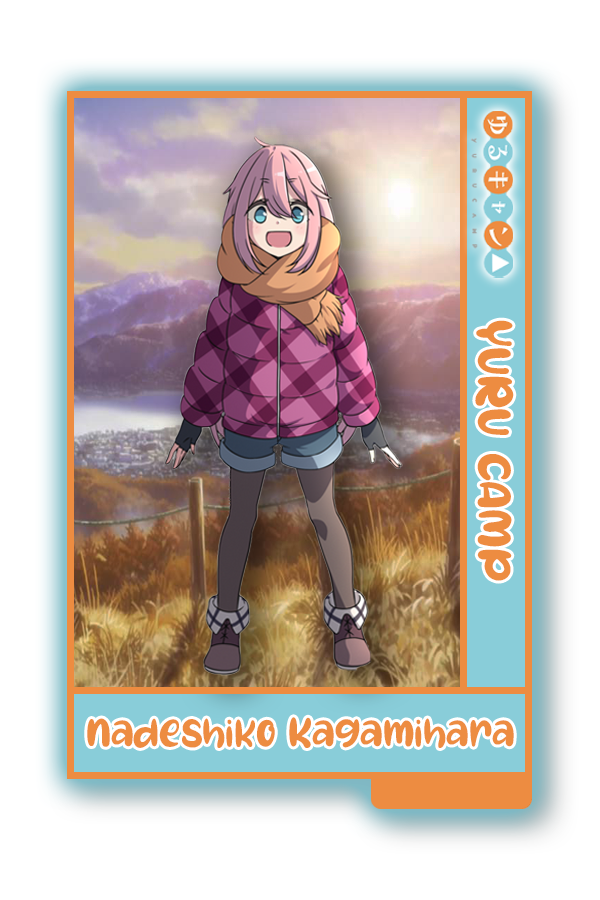
<style>
.page{position:relative;width:600px;height:900px;background:#ffffff}
.page>*{position:absolute;margin:0}
.t1{font:48.8px "OhMyBaby";color:#ed8c41}
.t2{font:41.1px "OhMyBaby";color:#ed8c41;scale:0.94 1}
</style>
<div class="page">
<p class="t1" style="left:475px;top:320px;width:39px;height:261px;rotate:90deg">YURU CAMP</p>
<p class="t2" style="left:87px;top:717px;width:427px;height:31px">Nadeshiko Kagamihara</p>
</div>
